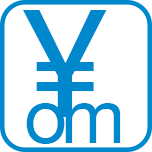
<style>
.page{position:relative;width:152px;height:152px;background:#ffffff}
.page>*{position:absolute;margin:0}
.t1{font:150px "HelveticaNeue";color:#0088cc}
.t2{font:75px "HelveticaNeue";letter-spacing:-0.075em;color:#0088cc}
</style>
<div class="page">
<p class="t1" style="left:23px;top:10px;width:84px;height:107px">¥</p>
<p class="t2" style="left:26px;top:103px;width:95px;height:41px">om</p>
</div>
